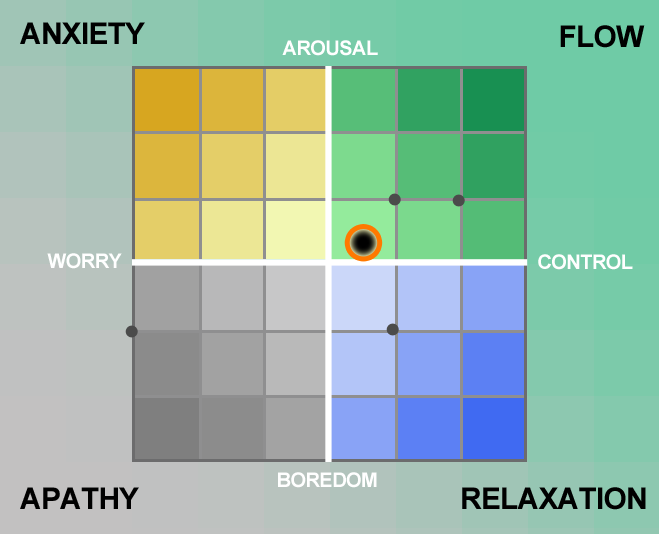
<style>
.page{position:relative;width:659px;height:534px}
.page>*{position:absolute;margin:0}
.t1{font:29.9px "Arial-BoldMT";letter-spacing:-0.025em;color:#000000;text-transform:uppercase}
.t2{font:19.9px "Arial-BoldMT";letter-spacing:-0.025em;color:#ffffff;text-transform:uppercase}
</style>
<div class="page">
<p class="t1" style="left:20px;top:22px;width:125px;height:22px">Anxiety</p>
<p class="t1" style="left:560px;top:25px;width:85px;height:23px">Flow</p>
<p class="t2" style="left:282px;top:40px;width:96px;height:16px">Arousal</p>
<p class="t2" style="left:47px;top:253px;width:75px;height:16px">WORRY</p>
<p class="t2" style="left:538px;top:254px;width:95px;height:16px">Control</p>
<p class="t2" style="left:278px;top:472px;width:99px;height:16px">BOREDOM</p>
<p class="t1" style="left:20px;top:487px;width:119px;height:22px">APATHY</p>
<p class="t1" style="left:462px;top:487px;width:184px;height:23px">RELAXATION</p>
</div>
